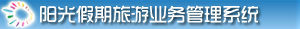
<style>
.page{position:relative;width:300px;height:29px}
.page>*{position:absolute;margin:0}
.t1{font:20.1px "TRENDS";color:#ffffff;scale:0.91 1}
</style>
<div class="page">
<p class="t1" style="left:40px;top:5px;width:218px;height:18px">阳光假期旅游业务管理系统</p>
</div>
